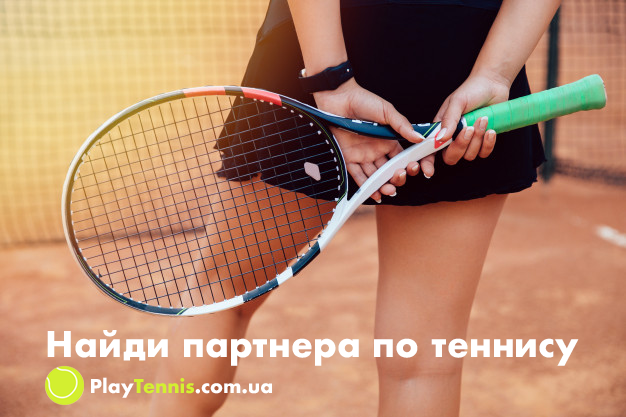
<style>
.page{position:relative;width:626px;height:417px}
.page>*{position:absolute;margin:0}
.t1{font:34.5px "Futura-Bold";color:#ffffff}
.t2{font:18.5px "Futura-Bold";color:#ffffff}
.t3{font:18.5px "Futura-Bold";color:#d3ef2f}
</style>
<div class="page">
<p class="t1" style="left:47px;top:330px;width:532px;height:36px">Найди партнера по теннису</p>
<p class="t2" style="left:91px;top:377px;width:181px;height:21px">Play<span class="t3">Tennis</span>.com.ua</p>
</div>
